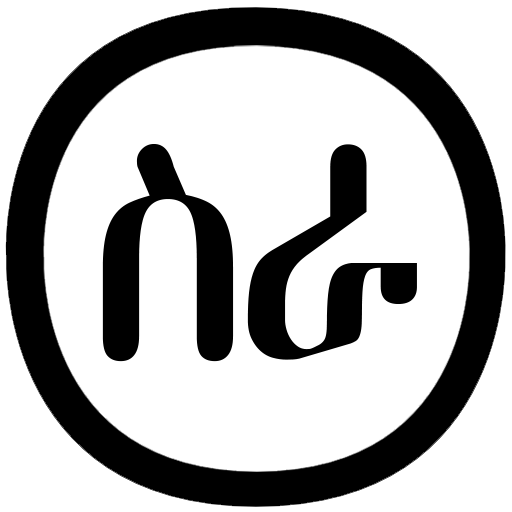
<style>
.page{position:relative;width:512px;height:512px;background:#ffffff}
.page>*{position:absolute;margin:0}
.t1{font:336.9px "EthiopicHiwua";letter-spacing:-0.05em;color:#000000;scale:0.9 1}
</style>
<div class="page">
<p class="t1" style="left:102px;top:144px;width:315px;height:218px">ስራ</p>
</div>
